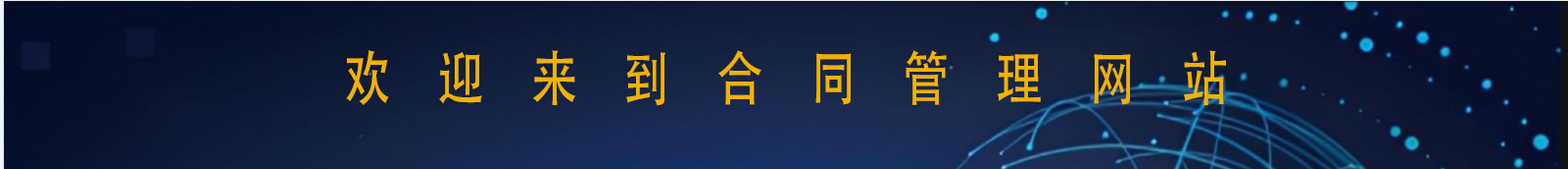
<style>
.page{position:relative;width:1568px;height:169px}
.page>*{position:absolute;margin:0}
.t1{font:58.8px "AdobeHeitiStd-Regular";letter-spacing:0.98em;color:#f1b200;scale:0.8 1}
</style>
<div class="page">
<p class="t1" style="left:346px;top:50px;width:880px;height:56px">欢迎来到合同管理网站</p>
</div>
